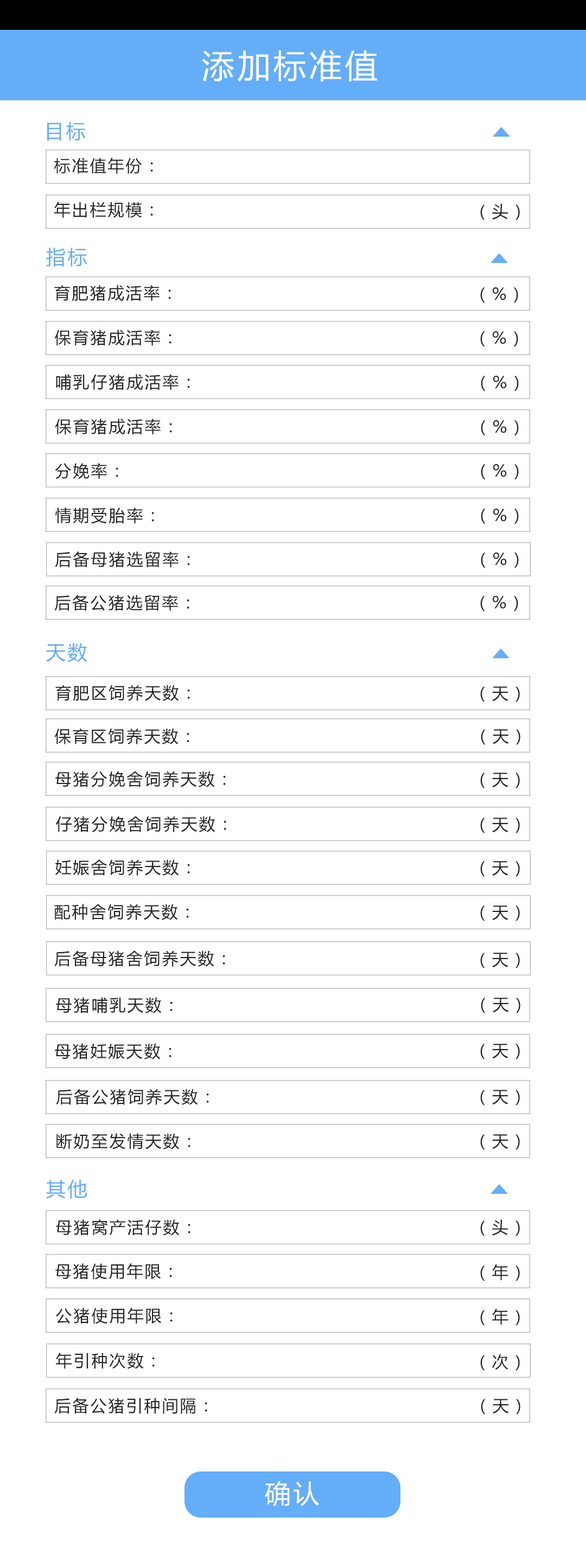
<style>
.page{position:relative;width:586px;height:1568px;background:#ffffff}
.page>*{position:absolute;margin:0}
.t1{font:32.5px "MicrosoftYaHei";letter-spacing:0.1em;color:#ffffff}
.t2{font:19.5px "MicrosoftYaHei";letter-spacing:0.1em;color:#64adf9}
.t3{font:16.3px "MicrosoftYaHei";letter-spacing:0.1em;color:#222222}
.t4{font:26px "MicrosoftYaHei";letter-spacing:0.1em;color:#ffffff}
</style>
<div class="page">
<p class="t1" style="left:202px;top:50px;width:175px;height:32px">添加标准值</p>
<p class="t2" style="left:47px;top:122px;width:39px;height:19px">目标</p>
<p class="t3" style="left:54px;top:158px;width:99px;height:16px">标准值年份：</p>
<p class="t3" style="left:54px;top:202px;width:99px;height:16px">年出栏规模：</p>
<p class="t3" style="left:480px;top:203px;width:39px;height:17px">（头）</p>
<p class="t2" style="left:46px;top:248px;width:41px;height:19px">指标</p>
<p class="t3" style="left:54px;top:285px;width:117px;height:16px">育肥猪成活率：</p>
<p class="t3" style="left:480px;top:287px;width:38px;height:16px">（%）</p>
<p class="t3" style="left:54px;top:330px;width:117px;height:16px">保育猪成活率：</p>
<p class="t3" style="left:480px;top:331px;width:38px;height:15px">（%）</p>
<p class="t3" style="left:56px;top:374px;width:134px;height:16px">哺乳仔猪成活率：</p>
<p class="t3" style="left:480px;top:376px;width:38px;height:15px">（%）</p>
<p class="t3" style="left:55px;top:419px;width:117px;height:16px">保育猪成活率：</p>
<p class="t3" style="left:480px;top:420px;width:38px;height:15px">（%）</p>
<p class="t3" style="left:55px;top:463px;width:63px;height:16px">分娩率：</p>
<p class="t3" style="left:480px;top:464px;width:38px;height:15px">（%）</p>
<p class="t3" style="left:55px;top:507px;width:99px;height:17px">情期受胎率：</p>
<p class="t3" style="left:480px;top:509px;width:38px;height:15px">（%）</p>
<p class="t3" style="left:55px;top:551px;width:135px;height:17px">后备母猪选留率：</p>
<p class="t3" style="left:480px;top:552px;width:38px;height:16px">（%）</p>
<p class="t3" style="left:54px;top:595px;width:135px;height:16px">后备公猪选留率：</p>
<p class="t3" style="left:480px;top:596px;width:38px;height:15px">（%）</p>
<p class="t2" style="left:46px;top:643px;width:41px;height:19px">天数</p>
<p class="t3" style="left:55px;top:685px;width:135px;height:16px">育肥区饲养天数：</p>
<p class="t3" style="left:480px;top:686px;width:39px;height:16px">（天）</p>
<p class="t3" style="left:54px;top:728px;width:135px;height:16px">保育区饲养天数：</p>
<p class="t3" style="left:480px;top:729px;width:40px;height:16px">（天）</p>
<p class="t3" style="left:55px;top:771px;width:171px;height:16px">母猪分娩舍饲养天数：</p>
<p class="t3" style="left:480px;top:773px;width:39px;height:15px">（天）</p>
<p class="t3" style="left:56px;top:816px;width:170px;height:16px">仔猪分娩舍饲养天数：</p>
<p class="t3" style="left:480px;top:818px;width:39px;height:15px">（天）</p>
<p class="t3" style="left:55px;top:859px;width:135px;height:17px">妊娠舍饲养天数：</p>
<p class="t3" style="left:480px;top:861px;width:39px;height:16px">（天）</p>
<p class="t3" style="left:54px;top:904px;width:135px;height:16px">配种舍饲养天数：</p>
<p class="t3" style="left:480px;top:905px;width:39px;height:16px">（天）</p>
<p class="t3" style="left:54px;top:950px;width:171px;height:17px">后备母猪舍饲养天数：</p>
<p class="t3" style="left:480px;top:953px;width:39px;height:15px">（天）</p>
<p class="t3" style="left:56px;top:997px;width:116px;height:16px">母猪哺乳天数：</p>
<p class="t3" style="left:480px;top:998px;width:40px;height:15px">（天）</p>
<p class="t3" style="left:55px;top:1043px;width:116px;height:16px">母猪妊娠天数：</p>
<p class="t3" style="left:480px;top:1044px;width:39px;height:15px">（天）</p>
<p class="t3" style="left:56px;top:1089px;width:153px;height:16px">后备公猪饲养天数：</p>
<p class="t3" style="left:480px;top:1090px;width:39px;height:16px">（天）</p>
<p class="t3" style="left:56px;top:1133px;width:134px;height:16px">断奶至发情天数：</p>
<p class="t3" style="left:480px;top:1134px;width:39px;height:16px">（天）</p>
<p class="t2" style="left:46px;top:1179px;width:41px;height:20px">其他</p>
<p class="t3" style="left:56px;top:1219px;width:134px;height:17px">母猪窝产活仔数：</p>
<p class="t3" style="left:480px;top:1219px;width:39px;height:17px">（头）</p>
<p class="t3" style="left:55px;top:1263px;width:117px;height:17px">母猪使用年限：</p>
<p class="t3" style="left:480px;top:1264px;width:39px;height:17px">（年）</p>
<p class="t3" style="left:56px;top:1308px;width:116px;height:16px">公猪使用年限：</p>
<p class="t3" style="left:480px;top:1309px;width:39px;height:17px">（年）</p>
<p class="t3" style="left:56px;top:1353px;width:99px;height:16px">年引种次数：</p>
<p class="t3" style="left:480px;top:1354px;width:39px;height:17px">（次）</p>
<p class="t3" style="left:54px;top:1398px;width:153px;height:16px">后备公猪引种间隔：</p>
<p class="t3" style="left:480px;top:1399px;width:40px;height:16px">（天）</p>
<p class="t4" style="left:265px;top:1481px;width:54px;height:26px">确认</p>
</div>
